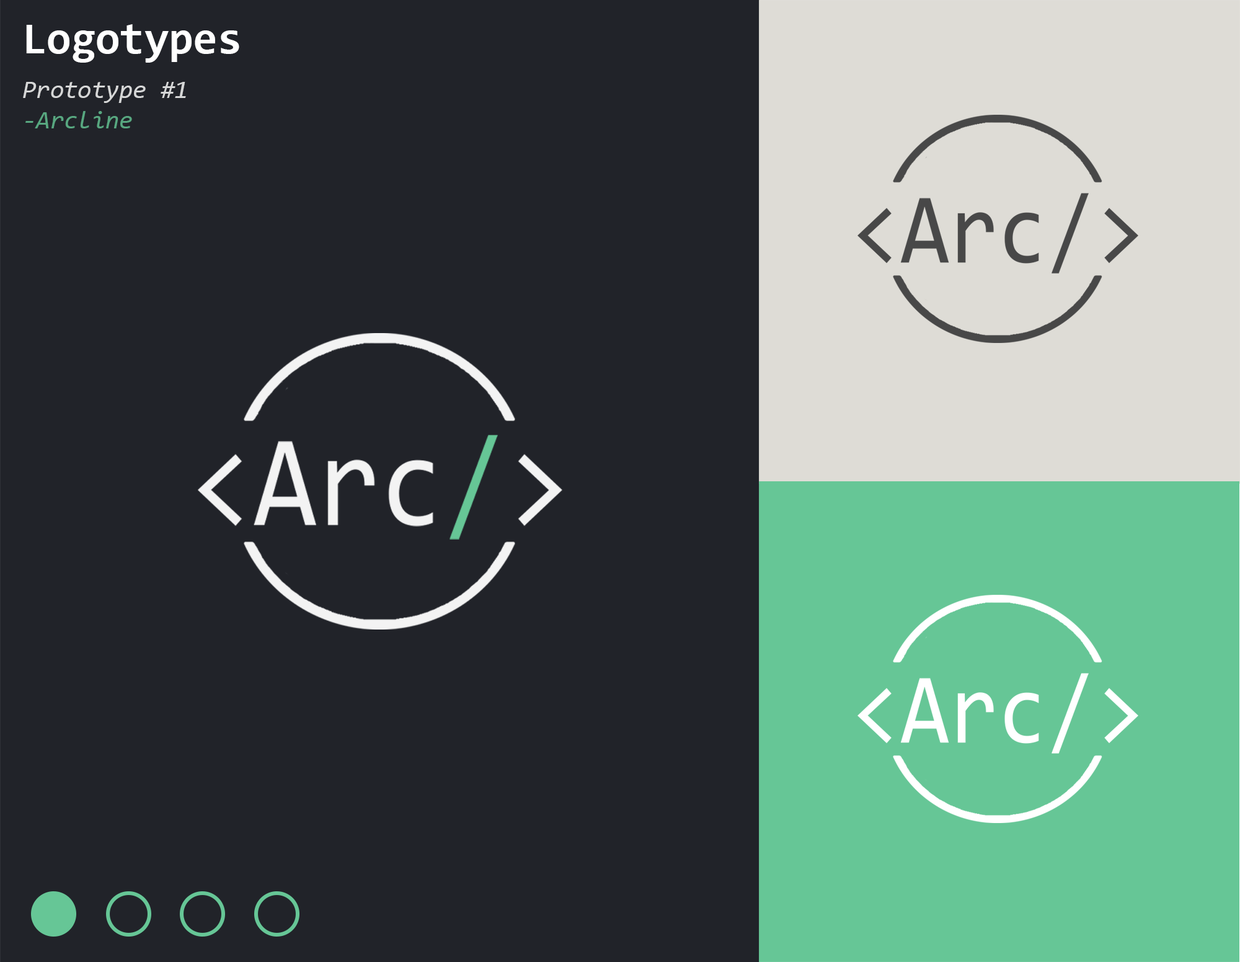
<style>
.page{position:relative;width:1240px;height:962px;background:#212329}
.page>*{position:absolute;margin:0}
.t1{font:44.4px "Consolas-Bold";color:#ffffff}
.t2{font:25.2px "Consolas-Italic"}
</style>
<div class="page">
<p class="t1" style="left:26px;top:24px;width:213px;height:39px">Logotypes</p>
<p class="t2" style="left:23px;top:82px;width:163px;height:46px">Prototype #1<br>-Arcline</p>
</div>
